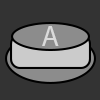
<style>
.page{position:relative;width:100px;height:100px;background:#333333}
.page>*{position:absolute;margin:0}
.t1{font:29.2px "MyriadPro-Regular";color:#dadada}
</style>
<div class="page">
<p class="t1" style="left:42px;top:26px;width:17px;height:20px">A</p>
</div>
